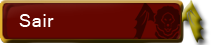
<style>
.page{position:relative;width:211px;height:45px;background:#650600}
.page>*{position:absolute;margin:0}
.t1{font:18px "MicrosoftSansSerif";letter-spacing:0.04em;color:#ffffff}
</style>
<div class="page">
<p class="t1" style="left:19px;top:14px;width:35px;height:13px">Sair</p>
</div>
